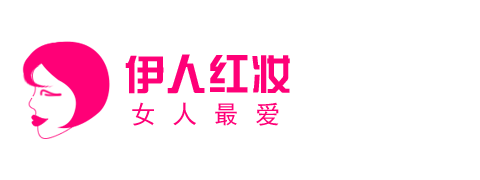
<style>
.page{position:relative;width:480px;height:180px;background:#ffffff}
.page>*{position:absolute;margin:0}
.t1{font:42.6px "FZZYJW--GB1-0";color:#ff0077}
.t2{font:25.1px "SimHei";letter-spacing:0.65em;color:#ff0077}
</style>
<div class="page">
<p class="t1" style="left:125px;top:54px;width:165px;height:40px">伊人红妆</p>
<p class="t2" style="left:132px;top:102px;width:147px;height:24px">女人最爱</p>
</div>
